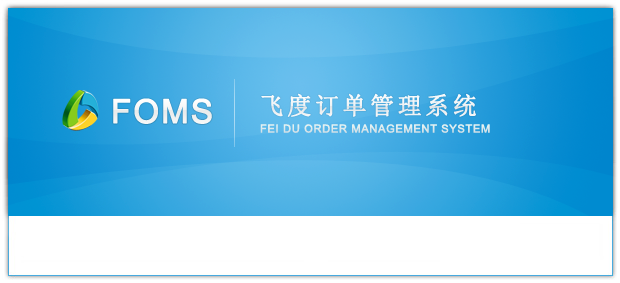
<style>
.page{position:relative;width:620px;height:283px;background:#ffffff}
.page>*{position:absolute;margin:0}
.t1{font:33px "ArialMT";letter-spacing:0.04em;color:#f4f5f5;font-weight:bold}
.t2{font:24px "NSimSun";letter-spacing:0.12em;color:#ffffff;font-weight:bold}
.t3{font:11px "ArialMT";letter-spacing:0.04em;color:#dce9ed;font-weight:bold}
</style>
<div class="page">
<p class="t1" style="left:113px;top:98px;width:99px;height:26px">FOMS</p>
<p class="t2" style="left:261px;top:93px;width:215px;height:24px">飞度订单管理系统</p>
<p class="t3" style="left:260px;top:124px;width:230px;height:9px">FEI DU ORDER MANAGEMENT SYSTEM</p>
</div>
